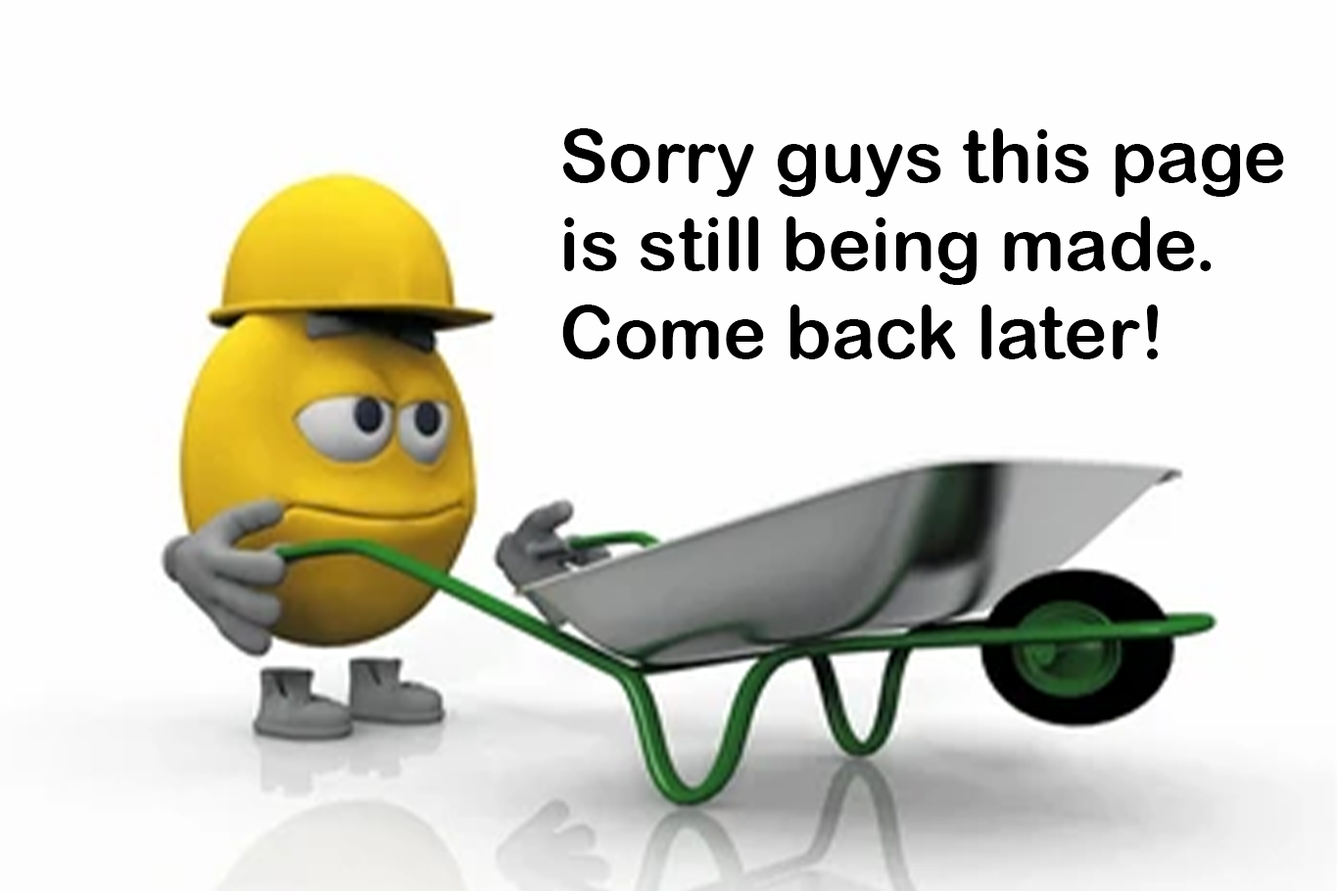
<style>
.page{position:relative;width:1338px;height:891px;background:#fefefe}
.page>*{position:absolute;margin:0}
.t1{font:73.5px "ArialRoundedMTBold";color:#000000}
</style>
<div class="page">
<p class="t1" style="left:562px;top:128px;width:722px;height:231px">Sorry guys this page is still being made. Come back later!</p>
</div>
